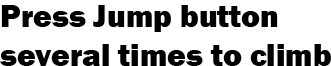
<style>
.page{position:relative;width:331px;height:66px;background:#ffffff}
.page>*{position:absolute;margin:0}
.t1{font:32px "FranklinGothic-Heavy";color:#000000}
</style>
<div class="page">
<p class="t1" style="left:0px;top:5px;width:331px;height:61px">Press Jump button<br>several times to climb</p>
</div>
